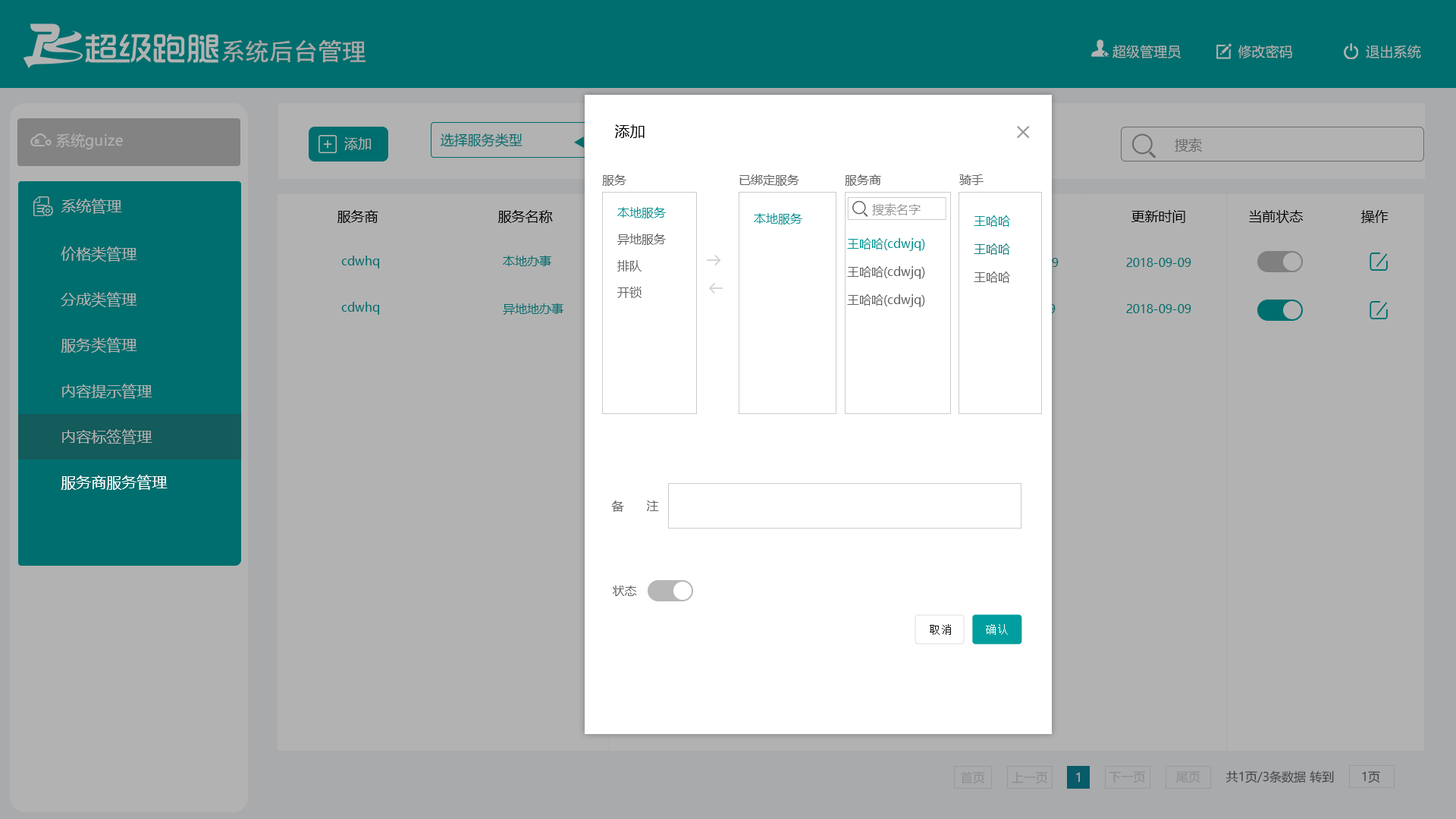
<style>
.page{position:relative;width:1456px;height:819px;background:#b2b2b2}
.page>*{position:absolute;margin:0}
.t1{font:24.4px "SimHei";color:#a8a8a8}
.t2{font:13.7px "MicrosoftYaHei";color:#b2b2b2}
.t3{font:15.2px "MicrosoftYaHei";color:#000000}
.t4{font:14.5px "MicrosoftYaHei";color:#b2b2b2}
.t5{font:13.6px "MicrosoftYaHei";color:#b2b2b2}
.t6{font:13.6px "MicrosoftYaHei";color:#006e6e}
.t7{font:13.6px "MicrosoftYaHei";color:#6b6b6b}
.t8{font:12.1px "MicrosoftYaHei";color:#666666}
.t9{font:15.2px "MicrosoftYaHei";color:#b2b2b2}
.t10{font:12.1px "MicrosoftYaHei";color:#009595}
.t11{font:12.1px "MicrosoftYaHei";color:#999999}
.t12{font:13.6px "MicrosoftYaHei";color:#000000}
.t13{font:12.1px "MicrosoftYaHei";color:#1c8282}
.t14{font:12.1px "MicrosoftYaHei";color:#006e6e}
.t15{font:15.2px "MicrosoftYaHei";color:#ffffff}
.t16{font:11.5px "SimSun";letter-spacing:0.075em;color:#111111}
.t17{font:11.5px "SimSun";letter-spacing:0.075em;color:#ffffff}
.t18{font:12.1px "MicrosoftYaHei";color:#8e8e8e}
.t19{font:12.1px "MicrosoftYaHei";color:#b2b2b2}
.t20{font:12.1px "MicrosoftYaHei";color:#464646}
</style>
<div class="page">
<p class="t1" style="left:222px;top:39px;width:144px;height:24px">系统后台管理</p>
<p class="t2" style="left:1112px;top:45px;width:309px;height:13px">超级管理员              修改密码                  退出系统</p>
<p class="t3" style="left:615px;top:124px;width:30px;height:14px">添加</p>
<p class="t4" style="left:56px;top:133px;width:67px;height:16px">系统guize</p>
<p class="t5" style="left:344px;top:137px;width:27px;height:13px">添加</p>
<p class="t6" style="left:441px;top:133px;width:81px;height:14px">选择服务类型</p>
<p class="t7" style="left:1175px;top:138px;width:27px;height:14px">搜索</p>
<p class="t8" style="left:602px;top:174px;width:24px;height:12px">服务</p>
<p class="t8" style="left:739px;top:174px;width:60px;height:12px">已绑定服务</p>
<p class="t8" style="left:845px;top:174px;width:36px;height:12px">服务商</p>
<p class="t8" style="left:959px;top:174px;width:25px;height:11px">骑手</p>
<p class="t9" style="left:61px;top:199px;width:61px;height:15px">系统管理</p>
<p class="t10" style="left:617px;top:207px;width:49px;height:11px">本地服务</p>
<p class="t11" style="left:872px;top:203px;width:49px;height:12px">搜索名字</p>
<p class="t12" style="left:337px;top:210px;width:41px;height:13px">服务商</p>
<p class="t12" style="left:498px;top:210px;width:55px;height:13px">服务名称</p>
<p class="t10" style="left:754px;top:213px;width:48px;height:11px">本地服务</p>
<p class="t10" style="left:974px;top:215px;width:36px;height:12px">王哈哈</p>
<p class="t12" style="left:1131px;top:210px;width:54px;height:13px">更新时间</p>
<p class="t12" style="left:1249px;top:210px;width:54px;height:13px">当前状态</p>
<p class="t12" style="left:1361px;top:210px;width:27px;height:13px">操作</p>
<p class="t8" style="left:617px;top:234px;width:49px;height:11px">异地服务</p>
<p class="t10" style="left:847px;top:238px;width:78px;height:13px">王哈哈(cdwjq)</p>
<p class="t13" style="left:974px;top:243px;width:36px;height:12px">王哈哈</p>
<p class="t9" style="left:61px;top:246px;width:76px;height:16px">价格类管理</p>
<p class="t14" style="left:341px;top:256px;width:38px;height:12px">cdwhq</p>
<p class="t14" style="left:503px;top:256px;width:48px;height:10px">本地办事</p>
<p class="t14" style="left:1126px;top:258px;width:65px;height:9px">2018-09-09</p>
<p class="t8" style="left:617px;top:260px;width:25px;height:11px">排队</p>
<p class="t8" style="left:847px;top:266px;width:78px;height:13px">王哈哈(cdwjq)</p>
<p class="t8" style="left:974px;top:271px;width:36px;height:12px">王哈哈</p>
<p class="t9" style="left:61px;top:292px;width:76px;height:15px">分成类管理</p>
<p class="t8" style="left:617px;top:287px;width:25px;height:11px">开锁</p>
<p class="t14" style="left:341px;top:302px;width:38px;height:13px">cdwhq</p>
<p class="t14" style="left:503px;top:303px;width:60px;height:12px">异地地办事</p>
<p class="t8" style="left:847px;top:294px;width:78px;height:13px">王哈哈(cdwjq)</p>
<p class="t14" style="left:1126px;top:304px;width:65px;height:9px">2018-09-09</p>
<p class="t9" style="left:61px;top:337px;width:76px;height:16px">服务类管理</p>
<p class="t9" style="left:62px;top:384px;width:90px;height:15px">内容提示管理</p>
<p class="t9" style="left:62px;top:429px;width:90px;height:15px">内容标签管理</p>
<p class="t15" style="left:61px;top:475px;width:107px;height:15px">服务商服务管理</p>
<p class="t8" style="left:611px;top:500px;width:48px;height:12px">备      注</p>
<p class="t8" style="left:613px;top:585px;width:24px;height:11px">状态</p>
<p class="t16" style="left:930px;top:624px;width:21px;height:11px">取消</p>
<p class="t17" style="left:986px;top:624px;width:22px;height:11px">确认</p>
<p class="t18" style="left:961px;top:771px;width:24px;height:13px">首页</p>
<p class="t18" style="left:1012px;top:772px;width:36px;height:12px">上一页</p>
<p class="t19" style="left:1076px;top:772px;width:4px;height:10px">1</p>
<p class="t18" style="left:1109px;top:771px;width:36px;height:12px">下一页</p>
<p class="t18" style="left:1176px;top:771px;width:24px;height:12px">尾页</p>
<p class="t20" style="left:1226px;top:770px;width:108px;height:13px">共1页/3条数据 转到</p>
<p class="t20" style="left:1362px;top:771px;width:18px;height:12px">1页</p>
</div>
